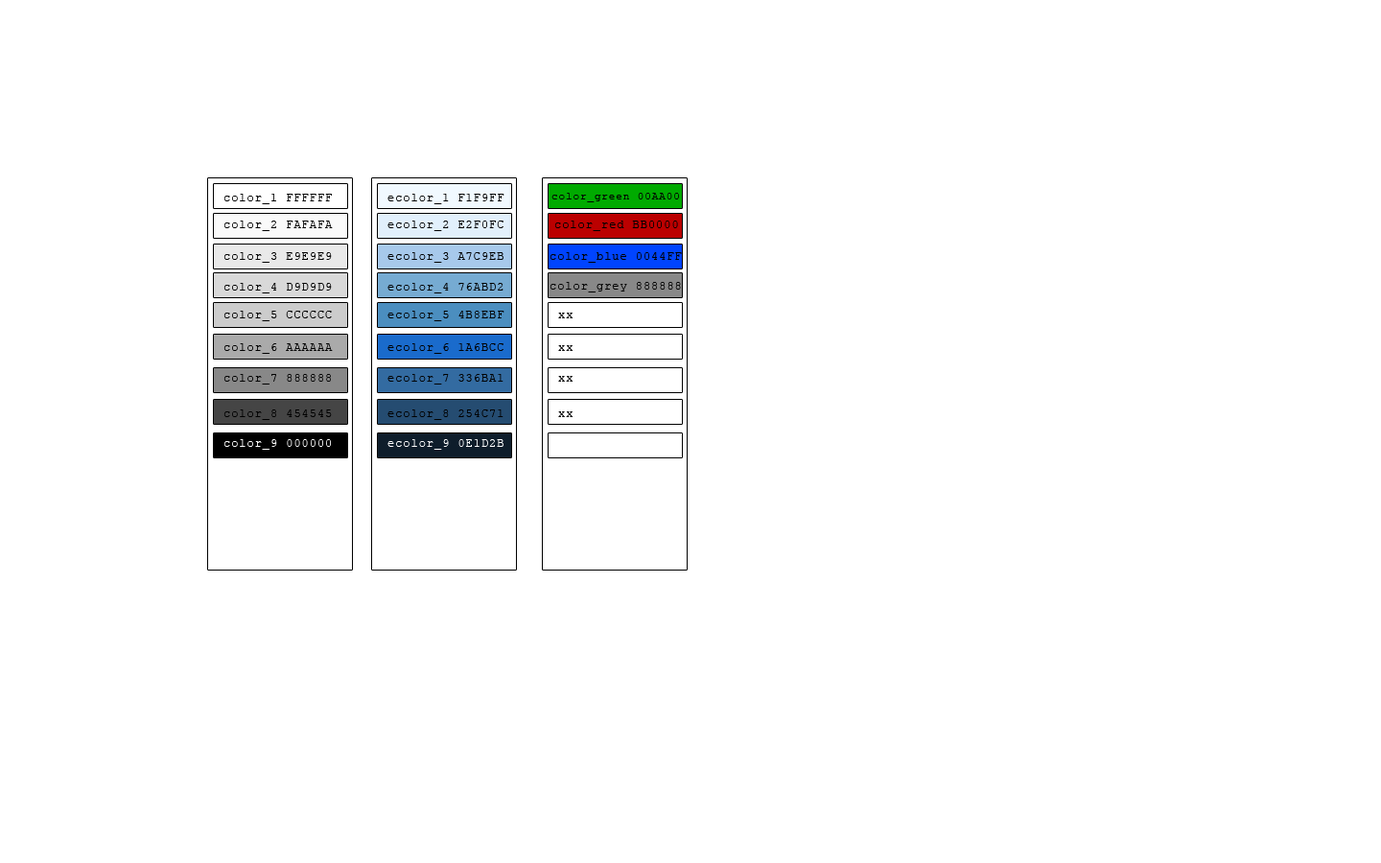
<style>
.page{position:relative;width:1381px;height:863px;background:#ffffff}
.page>*{position:absolute;margin:0}
.t1{font:11.5px "CourierNewPSMT";letter-spacing:0.08em;color:#000000}
.t2{font:10.6px "CourierNewPSMT";letter-spacing:0.08em;color:#000000}
.t3{font:11.5px "CourierNewPSMT";letter-spacing:0.08em;color:#ffffff}
</style>
<div class="page">
<p class="t1" style="left:223px;top:194px;width:109px;height:10px">color_1 FFFFFF</p>
<p class="t1" style="left:388px;top:194px;width:117px;height:10px">ecolor_1 F1F9FF</p>
<p class="t2" style="left:552px;top:193px;width:127px;height:9px">color_green 00AA00</p>
<p class="t1" style="left:223px;top:221px;width:110px;height:10px">color_2 FAFAFA</p>
<p class="t1" style="left:388px;top:221px;width:116px;height:10px">ecolor_2 E2F0FC</p>
<p class="t1" style="left:554px;top:221px;width:124px;height:10px">color_red BB0000</p>
<p class="t1" style="left:223px;top:252px;width:109px;height:11px">color_3 E9E9E9</p>
<p class="t1" style="left:388px;top:252px;width:116px;height:11px">ecolor_3 A7C9EB</p>
<p class="t1" style="left:550px;top:252px;width:132px;height:11px">color_blue 0044FF</p>
<p class="t1" style="left:223px;top:283px;width:109px;height:11px">color_4 D9D9D9</p>
<p class="t1" style="left:388px;top:283px;width:116px;height:11px">ecolor_4 76ABD2</p>
<p class="t1" style="left:550px;top:282px;width:131px;height:11px">color_grey 888888</p>
<p class="t1" style="left:223px;top:311px;width:109px;height:10px">color_5 CCCCCC</p>
<p class="t1" style="left:388px;top:311px;width:117px;height:10px">ecolor_5 4B8EBF</p>
<p class="t1" style="left:558px;top:313px;width:15px;height:5px">xx</p>
<p class="t1" style="left:223px;top:343px;width:110px;height:11px">color_6 AAAAAA</p>
<p class="t1" style="left:388px;top:343px;width:116px;height:11px">ecolor_6 1A6BCC</p>
<p class="t1" style="left:558px;top:345px;width:15px;height:6px">xx</p>
<p class="t1" style="left:223px;top:374px;width:108px;height:11px">color_7 888888</p>
<p class="t1" style="left:388px;top:374px;width:116px;height:11px">ecolor_7 336BA1</p>
<p class="t1" style="left:558px;top:376px;width:15px;height:6px">xx</p>
<p class="t1" style="left:223px;top:410px;width:109px;height:10px">color_8 454545</p>
<p class="t1" style="left:388px;top:410px;width:116px;height:10px">ecolor_8 254C71</p>
<p class="t1" style="left:558px;top:412px;width:15px;height:5px">xx</p>
<p class="t3" style="left:223px;top:439px;width:108px;height:11px">color_9 000000</p>
<p class="t3" style="left:388px;top:439px;width:116px;height:11px">ecolor_9 0E1D2B</p>
</div>
